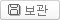
<style>
.page{position:relative;width:60px;height:20px;background:#ffffff}
.page>*{position:absolute;margin:0}
.t1{font:12px "Dotum";color:#757575}
</style>
<div class="page">
<p class="t1" style="left:25px;top:5px;width:23px;height:11px">보관</p>
</div>
